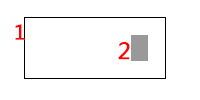
<style>
.page{position:relative;width:200px;height:100px;background:#ffffff}
.page>*{position:absolute;margin:0}
.t1{font:20px "MicrosoftYaHei";color:#ff0000;font-weight:bold}
.t2{font:22px "MicrosoftYaHei";color:#ff0000;font-weight:bold}
</style>
<div class="page">
<p class="t1" style="left:15px;top:24px;width:10px;height:16px">1</p>
<p class="t2" style="left:118px;top:42px;width:12px;height:18px">2</p>
</div>
